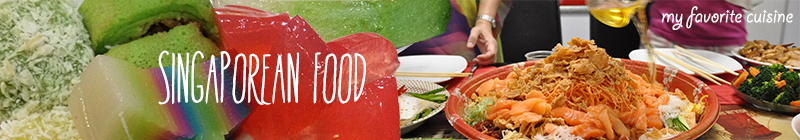
<style>
.page{position:relative;width:800px;height:140px}
.page>*{position:absolute;margin:0}
.t1{font:24.8px "GiddyupStd";color:#ffffff}
.t2{font:59.6px "InTheKnow-Regular";color:#ffffff}
</style>
<div class="page">
<p class="t1" style="left:662px;top:6px;width:131px;height:24px">my favorite cuisine</p>
<p class="t2" style="left:158px;top:50px;width:208px;height:55px">Singaporean Food</p>
</div>
